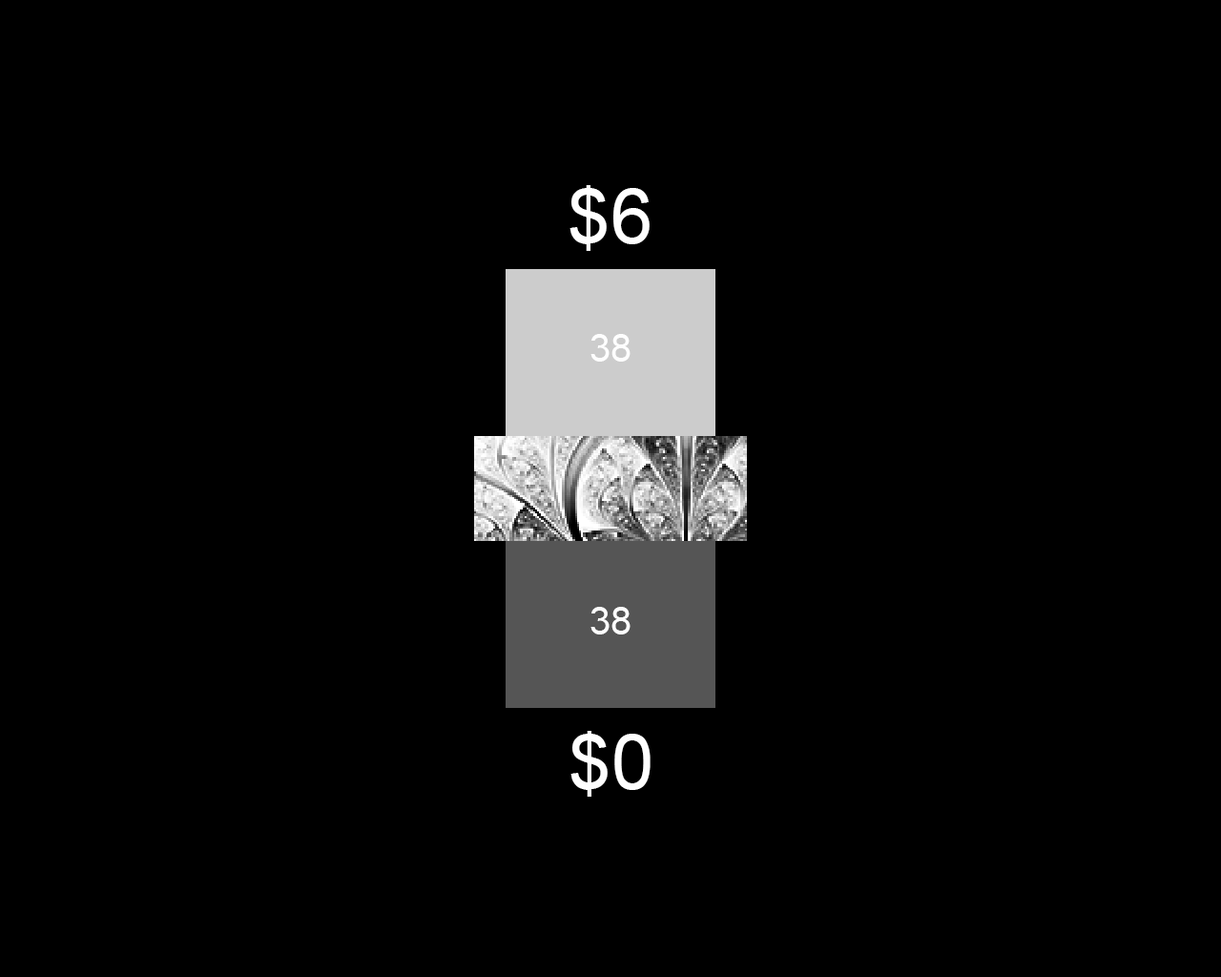
<style>
.page{position:relative;width:1221px;height:977px;background:#000000}
.page>*{position:absolute;margin:0}
.t1{font:76.3px "ArialMT";color:#fefefe}
.t2{font:38.2px "ArialMT";color:#fefefe}
</style>
<div class="page">
<p class="t1" style="left:569px;top:185px;width:81px;height:66px">$6</p>
<p class="t2" style="left:590px;top:334px;width:40px;height:27px">38</p>
<p class="t2" style="left:590px;top:607px;width:40px;height:27px">38</p>
<p class="t1" style="left:570px;top:731px;width:80px;height:65px">$0</p>
</div>
